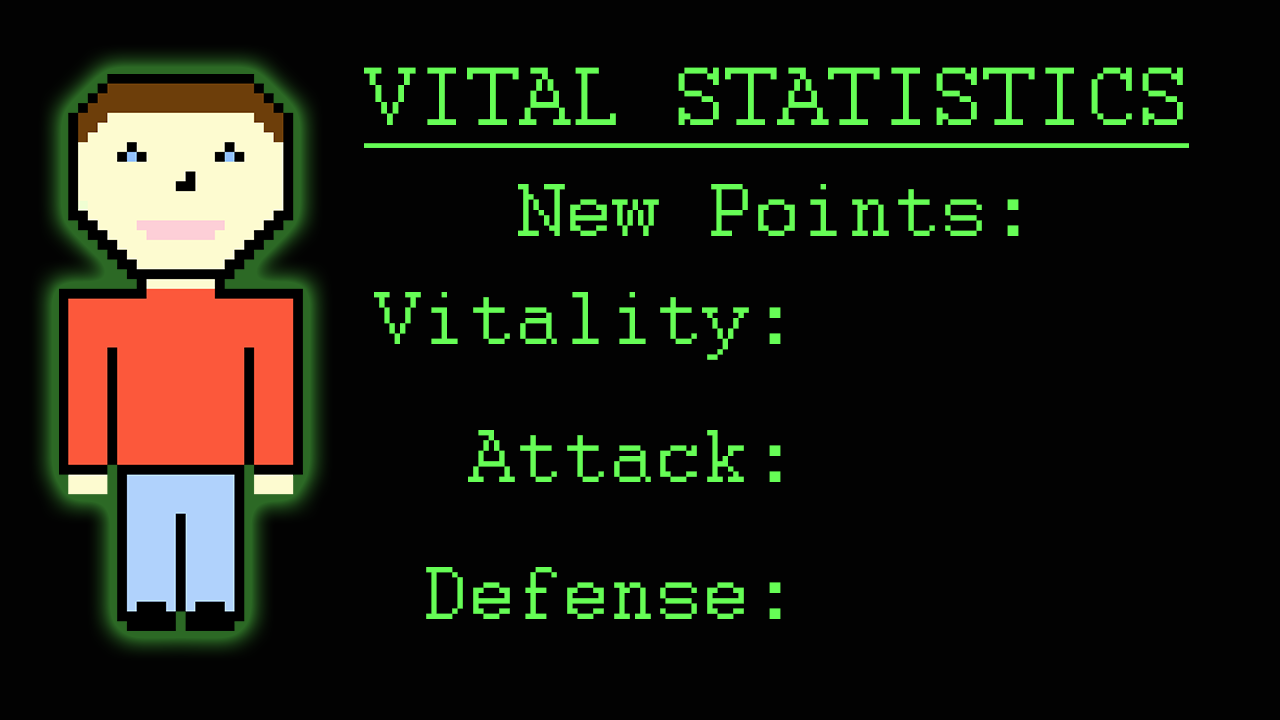
<style>
.page{position:relative;width:1280px;height:720px;background:#020202}
.page>*{position:absolute;margin:0}
.t1{font:91.7px "Courier";color:#66fd56;text-decoration:underline}
.t2{font:83.3px "Courier";color:#66fd56}
.t3{font:83.3px/137.5px "Courier";color:#66fd56}
</style>
<div class="page">
<p class="t1" style="left:364px;top:67px;width:825px;height:81px">VITAL STATISTICS</p>
<p class="t2" style="left:518px;top:184px;width:501px;height:52px">New Points:</p>
<p class="t3" style="left:374px;top:292px;width:407px;height:327px;text-align:right">Vitality:<br>Attack:<br>Defense:</p>
</div>
